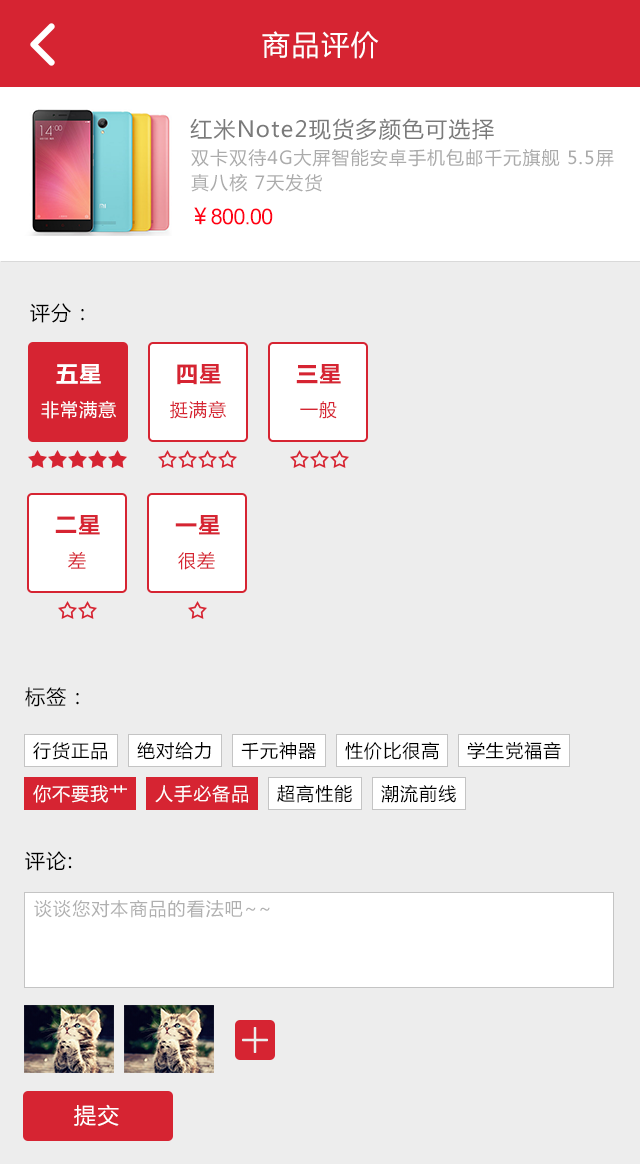
<style>
.page{position:relative;width:640px;height:1164px;background:#ededed}
.page>*{position:absolute;margin:0}
.t1{font:28px "MicrosoftYaHei";letter-spacing:0.06em;color:#ffffff}
.t2{font:22px "MicrosoftYaHei";letter-spacing:0.06em;color:#7a7a7a}
.t3{font:18px/25px "MicrosoftYaHei";letter-spacing:0.06em;color:#ababab}
.t4{font:22px "ArialMT";letter-spacing:-0.04em;color:#ff0014}
.t5{font:22px "MicrosoftYaHei";letter-spacing:-0.04em;color:#ff0014}
.t6{font:20px "MicrosoftYaHei";letter-spacing:0.06em;color:#000000}
.t7{font:22px "MicrosoftYaHei-Bold";letter-spacing:0.06em;color:#ffffff}
.t8{font:22px "MicrosoftYaHei-Bold";letter-spacing:0.06em;color:#d62432}
.t9{font:18px "MicrosoftYaHei";letter-spacing:0.06em;color:#ffffff}
.t10{font:18px "MicrosoftYaHei";letter-spacing:0.06em;color:#d62432}
.t11{font:18px "MicrosoftYaHei";letter-spacing:0.06em;color:#000000}
.t12{font:18px "MicrosoftYaHei";letter-spacing:0.06em;color:#b0b0b0}
.t13{font:22px "MicrosoftYaHei";letter-spacing:0.06em;color:#ffffff}
</style>
<div class="page">
<p class="t1" style="left:262px;top:31px;width:117px;height:28px">商品评价</p>
<p class="t2" style="left:190px;top:118px;width:304px;height:23px">红米Note2现货多颜色可选择</p>
<p class="t3" style="left:191px;top:148px;width:423px;height:44px">双卡双待4G大屏智能安卓手机包邮千元旗舰 5.5屏 <br>真八核 7天发货</p>
<p class="t4" style="left:194px;top:207px;width:79px;height:18px"><span class="t5">￥</span>800.00</p>
<p class="t6" style="left:30px;top:303px;width:54px;height:20px">评分：</p>
<p class="t7" style="left:56px;top:364px;width:45px;height:20px">五星</p>
<p class="t8" style="left:177px;top:364px;width:44px;height:21px">四星</p>
<p class="t8" style="left:296px;top:364px;width:45px;height:20px">三星</p>
<p class="t9" style="left:41px;top:400px;width:75px;height:19px">非常满意</p>
<p class="t10" style="left:170px;top:400px;width:56px;height:19px">挺满意</p>
<p class="t10" style="left:300px;top:401px;width:37px;height:18px">一般</p>
<p class="t8" style="left:55px;top:515px;width:45px;height:20px">二星</p>
<p class="t8" style="left:175px;top:515px;width:45px;height:20px">一星</p>
<p class="t10" style="left:68px;top:551px;width:18px;height:18px">差</p>
<p class="t10" style="left:178px;top:551px;width:37px;height:19px">很差</p>
<p class="t6" style="left:25px;top:687px;width:54px;height:20px">标签：</p>
<p class="t11" style="left:33px;top:742px;width:74px;height:18px">行货正品</p>
<p class="t11" style="left:137px;top:742px;width:74px;height:18px">绝对给力</p>
<p class="t11" style="left:241px;top:742px;width:75px;height:18px">千元神器</p>
<p class="t11" style="left:345px;top:742px;width:94px;height:18px">性价比很高</p>
<p class="t11" style="left:467px;top:741px;width:94px;height:19px">学生党福音</p>
<p class="t9" style="left:33px;top:785px;width:94px;height:18px">你不要我艹</p>
<p class="t9" style="left:155px;top:785px;width:93px;height:18px">人手必备品</p>
<p class="t11" style="left:277px;top:784px;width:75px;height:19px">超高性能</p>
<p class="t11" style="left:381px;top:784px;width:75px;height:19px">潮流前线</p>
<p class="t6" style="left:25px;top:851px;width:47px;height:20px">评论:</p>
<p class="t12" style="left:34px;top:900px;width:236px;height:18px">谈谈您对本商品的看法吧~~</p>
<p class="t13" style="left:74px;top:1104px;width:45px;height:22px">提交</p>
</div>
